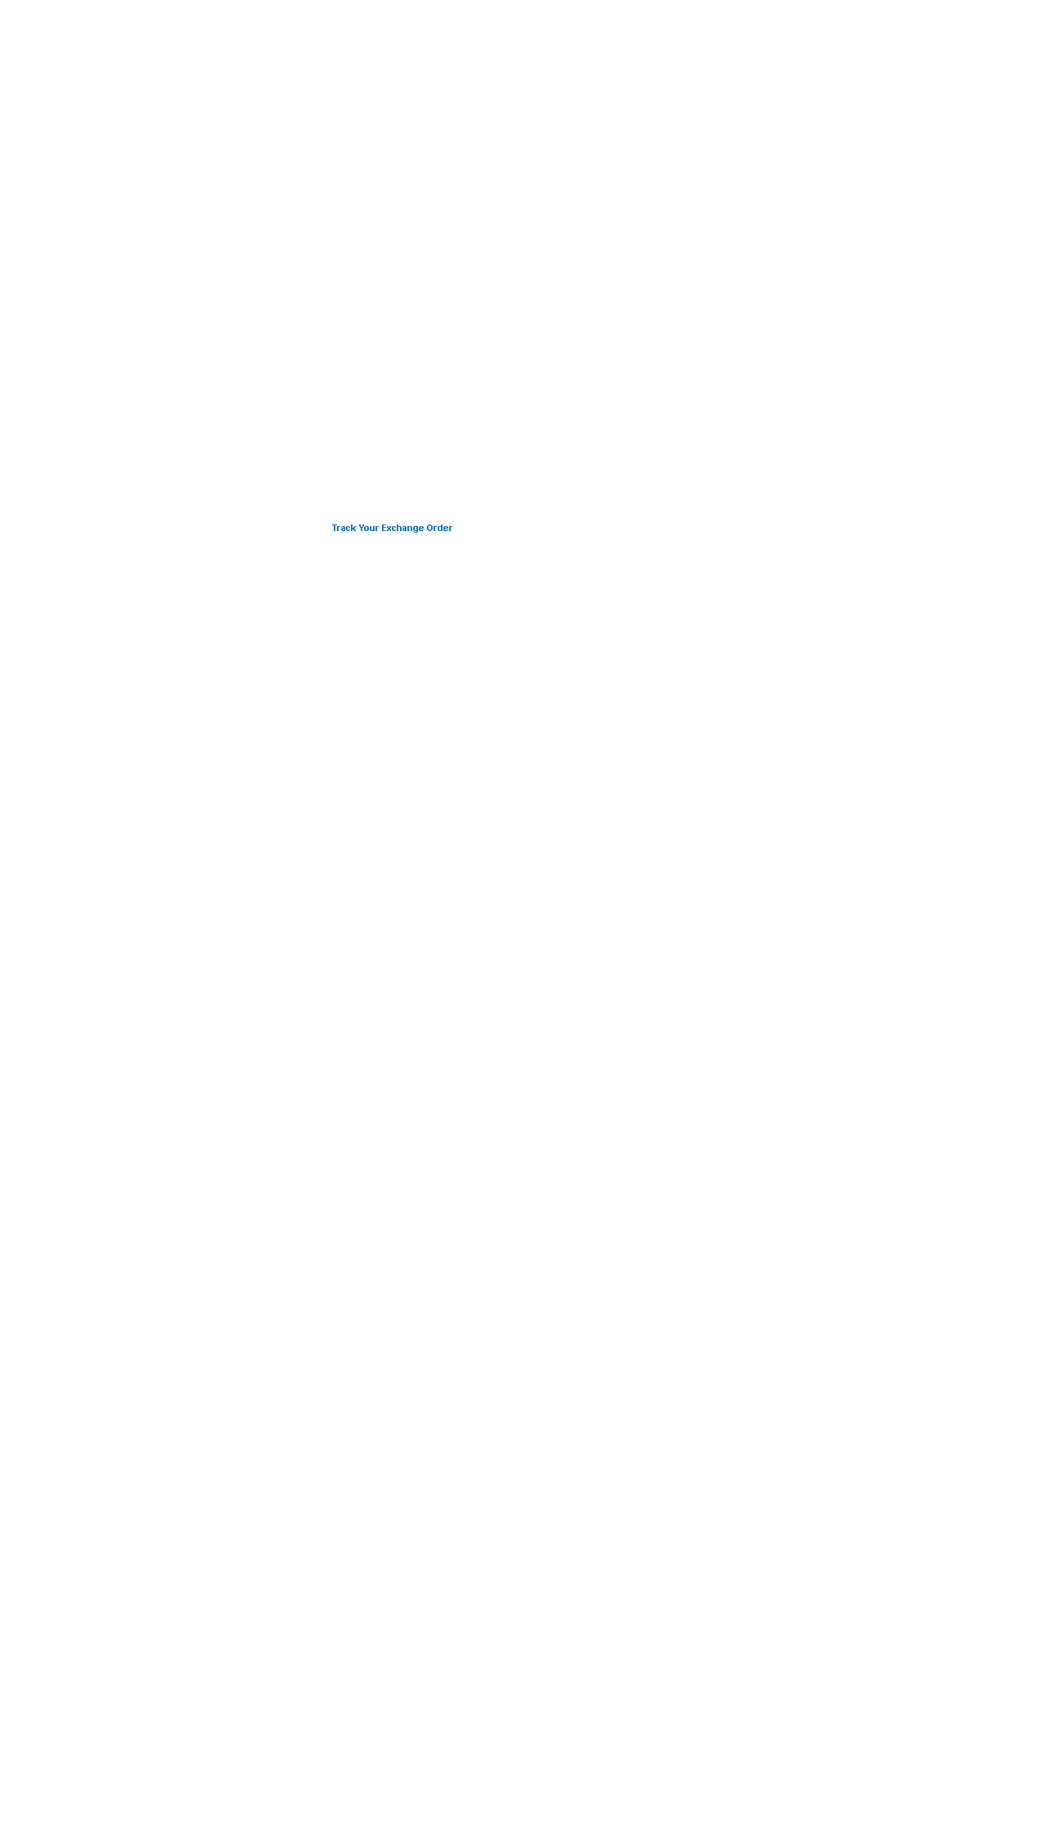
<style>
.page{position:relative;width:1047px;height:1841px;background:#ffffff}
.page>*{position:absolute;margin:0}
.t1{font:9px "Arial-BoldMT";color:#0b7dce}
</style>
<div class="page">
<p class="t1" style="left:332px;top:524px;width:120px;height:9px">Track Your Exchange Order</p>
</div>
